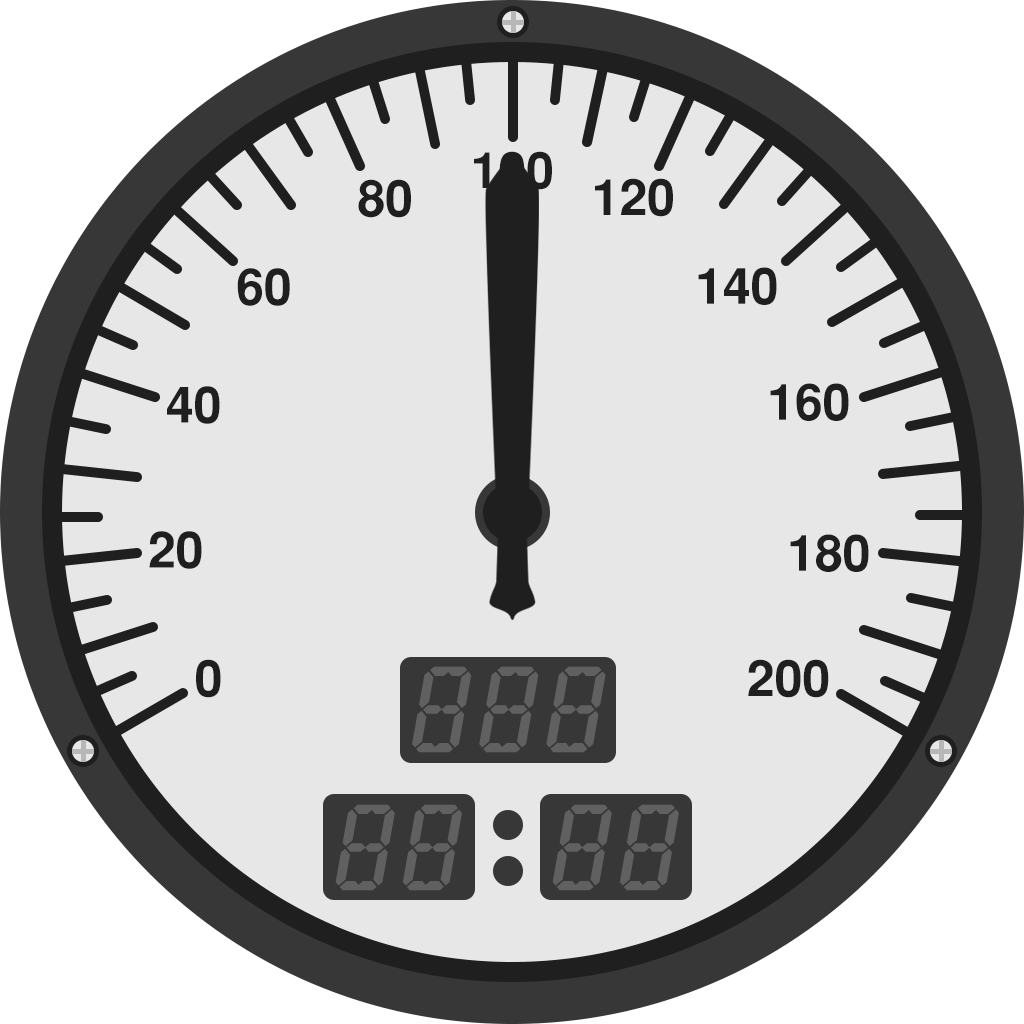
<style>
.page{position:relative;width:1024px;height:1024px;background:#e7e7e7}
.page>*{position:absolute;margin:0}
.t1{font:50px "SansSerifBold";color:#1f1f1f}
.t2{font:104.2px "Digit-Regular";letter-spacing:0.1em;color:#606060}
</style>
<div class="page">
<p class="t1" style="left:474px;top:151px;width:78px;height:39px">100</p>
<p class="t1" style="left:358px;top:179px;width:53px;height:39px">80</p>
<p class="t1" style="left:595px;top:178px;width:78px;height:39px">120</p>
<p class="t1" style="left:237px;top:268px;width:53px;height:38px">60</p>
<p class="t1" style="left:698px;top:267px;width:79px;height:38px">140</p>
<p class="t1" style="left:167px;top:386px;width:53px;height:38px">40</p>
<p class="t1" style="left:770px;top:383px;width:79px;height:38px">160</p>
<p class="t1" style="left:149px;top:531px;width:53px;height:38px">20</p>
<p class="t1" style="left:790px;top:534px;width:79px;height:38px">180</p>
<p class="t1" style="left:196px;top:659px;width:25px;height:39px">0</p>
<p class="t1" style="left:748px;top:659px;width:81px;height:39px">200</p>
<p class="t2" style="left:412px;top:666px;width:194px;height:87px">888</p>
<p class="t2" style="left:335px;top:804px;width:127px;height:87px">88</p>
<p class="t2" style="left:552px;top:804px;width:127px;height:87px">88</p>
</div>
